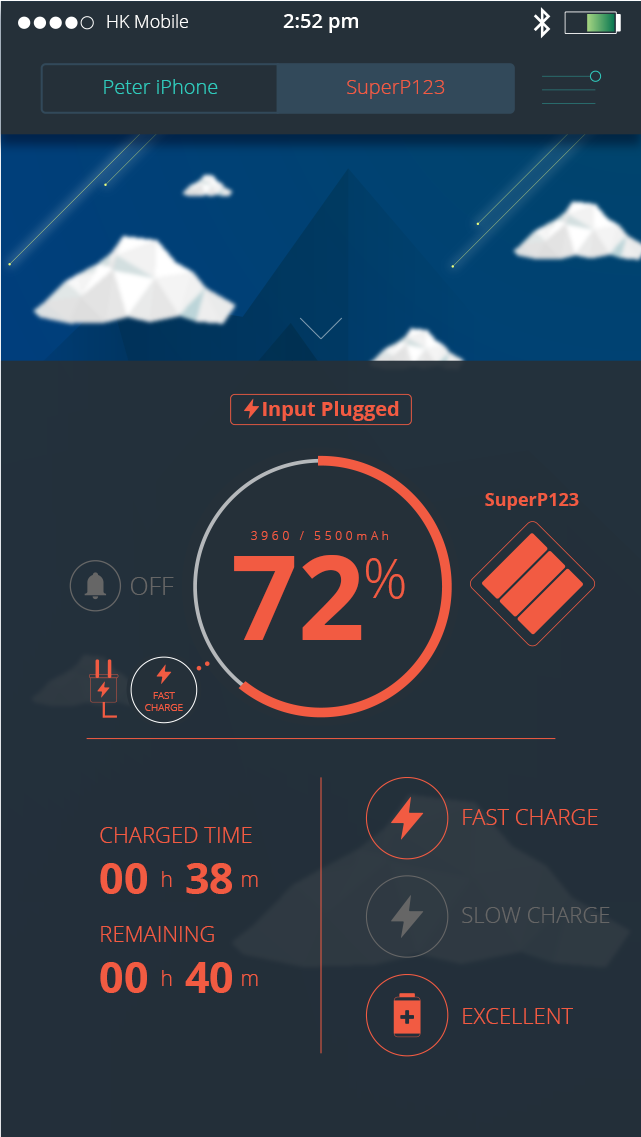
<style>
.page{position:relative;width:641px;height:1137px}
.page>*{position:absolute;margin:0}
.t1{font:18px "OpenSans-Light";color:#ffffff}
.t2{font:20px "OpenSans-Semibold";color:#ffffff}
.t3{font:20px "OpenSans-Light";color:#30cbbd}
.t4{font:20px "OpenSans-Light";color:#f25b42}
.t5{font:20px "OpenSans-Bold";color:#f25b42}
.t6{font:18px "OpenSans-Bold";color:#f25b42}
.t7{font:12.4px "OpenSans-Light";letter-spacing:0.28em;color:#f25b42}
.t8{font:117.2px "OpenSans-Bold";color:#f25b42}
.t9{font:55px "OpenSans-Light";color:#f25b42}
.t10{font:25px "OpenSans-Light";color:#666666}
.t11{font:10px/12px "OpenSans-Light";color:#f25b42}
.t12{font:22px "OpenSans-Light";color:#f25b42}
.t13{font:43px "OpenSans-Bold";color:#f25b42}
.t14{font:21px "OpenSans-Light";color:#f25b42}
.t15{font:22px "OpenSans-Light";color:#666666}
</style>
<div class="page">
<p class="t1" style="left:107px;top:14px;width:81px;height:14px">HK Mobile</p>
<p class="t2" style="left:283px;top:14px;width:75px;height:19px">2:52 pm</p>
<p class="t3" style="left:104px;top:79px;width:114px;height:15px">Peter iPhone</p>
<p class="t4" style="left:347px;top:80px;width:98px;height:19px">SuperP123</p>
<p class="t5" style="left:263px;top:401px;width:136px;height:20px">Input Plugged</p>
<p class="t6" style="left:485px;top:493px;width:94px;height:17px">SuperP123</p>
<p class="t7" style="left:251px;top:531px;width:137px;height:9px">3960 / 5500mAh</p>
<p class="t8" style="left:234px;top:555px;width:128px;height:85px">72</p>
<p class="t9" style="left:366px;top:558px;width:39px;height:41px">%</p>
<p class="t10" style="left:131px;top:577px;width:43px;height:18px">OFF</p>
<p class="t11" style="left:145px;top:692px;width:38px;height:19px;text-align:center">FAST<br>CHARGE</p>
<p class="t12" style="left:463px;top:809px;width:135px;height:16px">FAST CHARGE</p>
<p class="t12" style="left:100px;top:827px;width:152px;height:16px">CHARGED TIME</p>
<p class="t13" style="left:100px;top:863px;width:47px;height:31px">00</p>
<p class="t13" style="left:186px;top:863px;width:46px;height:31px">38</p>
<p class="t14" style="left:162px;top:871px;width:10px;height:16px">h</p>
<p class="t14" style="left:242px;top:875px;width:16px;height:12px">m</p>
<p class="t15" style="left:462px;top:907px;width:148px;height:16px">SLOW CHARGE</p>
<p class="t12" style="left:101px;top:926px;width:113px;height:16px">REMAINING</p>
<p class="t13" style="left:100px;top:962px;width:47px;height:31px">00</p>
<p class="t13" style="left:185px;top:962px;width:47px;height:31px">40</p>
<p class="t14" style="left:162px;top:970px;width:10px;height:16px">h</p>
<p class="t14" style="left:242px;top:974px;width:16px;height:12px">m</p>
<p class="t12" style="left:463px;top:1008px;width:110px;height:16px">EXCELLENT</p>
</div>
